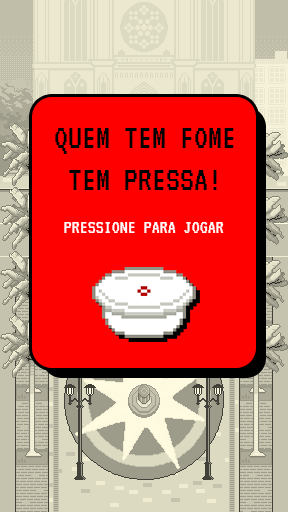
<style>
.page{position:relative;width:288px;height:512px;background:#ff0000}
.page>*{position:absolute;margin:0}
.t1{font:35px "VT323-Regular";color:#000000}
.t2{font:20px "VT323-Regular";color:#ffffff}
</style>
<div class="page">
<p class="t1" style="left:55px;top:128px;width:179px;height:62px;text-align:center">QUEM TEM FOME<br>TEM PRESSA!</p>
<p class="t2" style="left:64px;top:222px;width:160px;height:11px">PRESSIONE PARA JOGAR</p>
</div>
